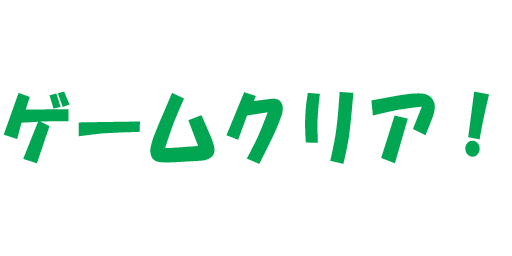
<style>
.page{position:relative;width:512px;height:256px;background:#ffffff}
.page>*{position:absolute;margin:0}
.t1{font:80.5px "HGSoeiKakupoptai";color:#00a651;scale:0.91 1}
</style>
<div class="page">
<p class="t1" style="left:3px;top:91px;width:486px;height:73px">ゲームクリア！</p>
</div>
